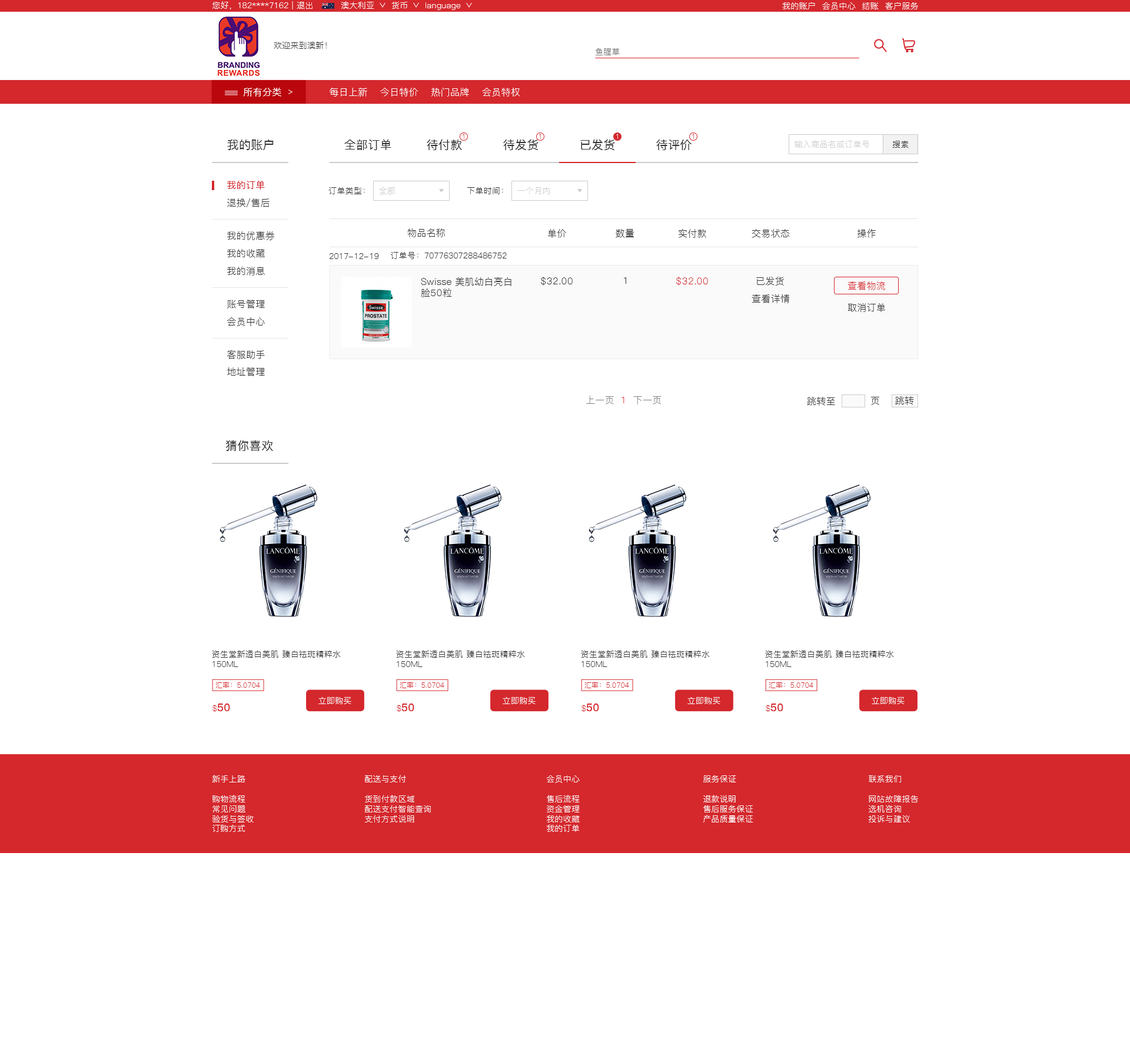
<style>
.page{position:relative;width:1130px;height:1055px;background:#ffffff}
.page>*{position:absolute;margin:0}
.t1{font:8.2px "PingFang-SC-Regular";letter-spacing:0.02em;color:#ffffff}
.t2{font:8.2px "PingFang-SC-Regular";letter-spacing:0.02em;color:#333333}
.t3{font:8.2px "PingFang-SC-Regular";letter-spacing:0.02em;color:#767676}
.t4{font:9.4px "PingFang-SC-Medium";letter-spacing:0.02em;color:#ffffff}
.t5{font:9.4px "PingFang-SC-Regular";letter-spacing:0.02em;color:#ffffff}
.t6{font:7.1px "PingFang-SC-Regular";letter-spacing:0.02em;color:#d4282d}
.t7{font:7.1px "PingFang-SC-Regular";letter-spacing:0.02em;color:#ffffff}
.t8{font:7.1px "PingFang-SC-Regular";letter-spacing:0.02em;color:#d52d32}
.t9{font:11.8px "PingFang-SC-Medium";letter-spacing:0.02em;color:#333333}
.t10{font:8.2px "PingFang-SC-Regular";letter-spacing:0.02em;color:#cccccc}
.t11{font:9.4px "PingFang-SC-Medium";letter-spacing:0.02em;color:#d4282d}
.t12{font:9.4px "PingFang-SC-Regular";letter-spacing:0.02em;color:#343434}
.t13{font:8.2px "PingFang-SC-Regular";letter-spacing:0.02em;color:#343434}
.t14{font:9.4px "PingFang-SC-Regular";letter-spacing:0.02em;color:#333333}
.t15{font:9.4px "PingFang-SC-Regular";letter-spacing:0.02em;color:#d4282d}
.t16{font:9.4px "PingFang-SC-Regular";letter-spacing:0.02em;color:#808080}
.t17{font:9.4px "PingFang-SC-Regular";letter-spacing:0.02em;color:#353535}
.t18{font:10.6px "PingFang-SC-Bold";letter-spacing:0.02em;color:#d4282d}
.t19{font:8.2px "PingFang-SC-Regular";letter-spacing:0.02em;color:#d4282d}
.t20{font:8.2px "PingFang-SC-Regular";letter-spacing:0.02em;color:#fffefe}
</style>
<div class="page">
<p class="t1" style="left:213px;top:1px;width:100px;height:8px">您好，182****7162 | 退出</p>
<p class="t1" style="left:341px;top:1px;width:33px;height:8px">澳大利亚</p>
<p class="t1" style="left:391px;top:2px;width:16px;height:7px">货币</p>
<p class="t1" style="left:426px;top:2px;width:35px;height:8px">language</p>
<p class="t1" style="left:782px;top:2px;width:136px;height:8px">我的账户  会员中心  结账  客户服务</p>
<p class="t2" style="left:274px;top:41px;width:53px;height:8px">欢迎来到澳新！</p>
<p class="t3" style="left:595px;top:48px;width:25px;height:7px">鱼腥草</p>
<p class="t4" style="left:243px;top:88px;width:38px;height:9px">所有分类</p>
<p class="t5" style="left:330px;top:88px;width:190px;height:9px">每日上新    今日特价    热门品牌    会员特权</p>
<p class="t6" style="left:463px;top:134px;width:1px;height:5px">1</p>
<p class="t6" style="left:539px;top:134px;width:2px;height:5px">1</p>
<p class="t7" style="left:616px;top:134px;width:2px;height:5px">1</p>
<p class="t8" style="left:692px;top:134px;width:2px;height:5px">1</p>
<p class="t9" style="left:227px;top:140px;width:47px;height:10px">我的账户</p>
<p class="t9" style="left:344px;top:140px;width:47px;height:10px">全部订单</p>
<p class="t9" style="left:427px;top:139px;width:35px;height:11px">待付款</p>
<p class="t9" style="left:503px;top:140px;width:35px;height:10px">待发货</p>
<p class="t9" style="left:580px;top:140px;width:35px;height:10px">已发货</p>
<p class="t9" style="left:656px;top:140px;width:36px;height:10px">待评价</p>
<p class="t10" style="left:795px;top:140px;width:75px;height:8px">输入商品名或订单号</p>
<p class="t2" style="left:892px;top:141px;width:17px;height:7px">搜索</p>
<p class="t11" style="left:227px;top:181px;width:38px;height:9px">我的订单</p>
<p class="t2" style="left:328px;top:187px;width:37px;height:7px">订单类型：</p>
<p class="t10" style="left:379px;top:187px;width:16px;height:7px">全部</p>
<p class="t2" style="left:467px;top:187px;width:36px;height:7px">下单时间：</p>
<p class="t10" style="left:517px;top:187px;width:33px;height:7px">一个月内</p>
<p class="t12" style="left:227px;top:198px;width:43px;height:9px">退换/售后</p>
<p class="t12" style="left:227px;top:231px;width:47px;height:9px">我的优惠券</p>
<p class="t12" style="left:407px;top:228px;width:38px;height:9px">物品名称</p>
<p class="t12" style="left:548px;top:229px;width:18px;height:9px">单价</p>
<p class="t12" style="left:616px;top:229px;width:19px;height:9px">数量</p>
<p class="t12" style="left:679px;top:229px;width:27px;height:9px">实付款</p>
<p class="t12" style="left:752px;top:229px;width:38px;height:9px">交易状态</p>
<p class="t12" style="left:858px;top:229px;width:18px;height:9px">操作</p>
<p class="t12" style="left:227px;top:249px;width:38px;height:9px">我的收藏</p>
<p class="t13" style="left:330px;top:253px;width:49px;height:6px">2017-12-19</p>
<p class="t13" style="left:391px;top:252px;width:116px;height:7px">订单号：70776307288486752</p>
<p class="t12" style="left:227px;top:267px;width:38px;height:9px">我的消息</p>
<p class="t14" style="left:421px;top:277px;width:91px;height:20px">Swisse 美肌幼白亮白<br>脸50粒</p>
<p class="t12" style="left:541px;top:277px;width:32px;height:9px">$32.00</p>
<p class="t12" style="left:624px;top:277px;width:2px;height:7px">1</p>
<p class="t15" style="left:676px;top:277px;width:32px;height:9px">$32.00</p>
<p class="t12" style="left:756px;top:277px;width:28px;height:9px">已发货</p>
<p class="t15" style="left:848px;top:281px;width:37px;height:9px">查看物流</p>
<p class="t12" style="left:227px;top:300px;width:38px;height:8px">账号管理</p>
<p class="t12" style="left:752px;top:294px;width:38px;height:9px">查看详情</p>
<p class="t14" style="left:848px;top:303px;width:37px;height:9px">取消订单</p>
<p class="t12" style="left:227px;top:317px;width:38px;height:9px">会员中心</p>
<p class="t12" style="left:227px;top:350px;width:38px;height:9px">客服助手</p>
<p class="t12" style="left:227px;top:367px;width:38px;height:9px">地址管理</p>
<p class="t16" style="left:586px;top:396px;width:76px;height:8px">上一页<span class="t15">  1  </span>下一页</p>
<p class="t17" style="left:807px;top:397px;width:28px;height:9px">跳转至</p>
<p class="t17" style="left:871px;top:397px;width:9px;height:8px">页</p>
<p class="t17" style="left:895px;top:396px;width:19px;height:9px">跳转</p>
<p class="t9" style="left:226px;top:440px;width:47px;height:11px">猜你喜欢</p>
<p class="t2" style="left:212px;top:650px;width:129px;height:17px">资生堂新透白美肌 臻白祛斑精粹水<br>150ML</p>
<p class="t2" style="left:396px;top:650px;width:129px;height:17px">资生堂新透白美肌 臻白祛斑精粹水<br>150ML</p>
<p class="t2" style="left:581px;top:650px;width:129px;height:17px">资生堂新透白美肌 臻白祛斑精粹水<br>150ML</p>
<p class="t2" style="left:765px;top:650px;width:129px;height:17px">资生堂新透白美肌 臻白祛斑精粹水<br>150ML</p>
<p class="t6" style="left:215px;top:682px;width:45px;height:6px">汇率：5.0704</p>
<p class="t6" style="left:400px;top:682px;width:44px;height:6px">汇率：5.0704</p>
<p class="t6" style="left:585px;top:682px;width:44px;height:6px">汇率：5.0704</p>
<p class="t6" style="left:769px;top:682px;width:45px;height:6px">汇率：5.0704</p>
<p class="t1" style="left:318px;top:697px;width:33px;height:7px">立即购买</p>
<p class="t1" style="left:503px;top:697px;width:33px;height:7px">立即购买</p>
<p class="t1" style="left:688px;top:697px;width:33px;height:7px">立即购买</p>
<p class="t1" style="left:872px;top:697px;width:33px;height:7px">立即购买</p>
<p class="t18" style="left:213px;top:704px;width:17px;height:8px"><span class="t19">$</span>50</p>
<p class="t18" style="left:397px;top:704px;width:17px;height:8px"><span class="t19">$</span>50</p>
<p class="t18" style="left:582px;top:704px;width:17px;height:8px"><span class="t19">$</span>50</p>
<p class="t18" style="left:766px;top:704px;width:18px;height:8px"><span class="t19">$</span>50</p>
<p class="t20" style="left:212px;top:775px;width:42px;height:57px">新手上路<br><br>购物流程<br>常见问题<br>验货与签收<br>订购方式</p>
<p class="t20" style="left:365px;top:775px;width:66px;height:47px">配送与支付<br><br>货到付款区域<br>配送支付智能查询<br>支付方式说明</p>
<p class="t20" style="left:546px;top:775px;width:34px;height:57px">会员中心<br><br>售后流程<br>资金管理<br>我的收藏<br>我的订单</p>
<p class="t20" style="left:704px;top:775px;width:50px;height:47px">服务保证<br><br>退款说明<br>售后服务保证<br>产品质量保证</p>
<p class="t20" style="left:868px;top:775px;width:50px;height:47px">联系我们<br><br>网站故障报告<br>选机咨询<br>投诉与建议</p>
</div>
